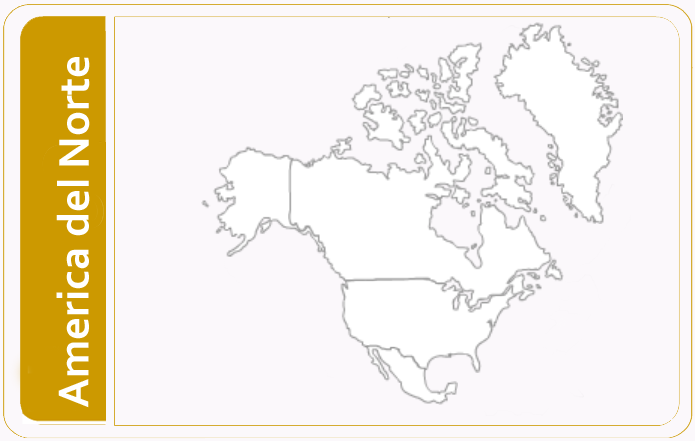
<style>
.page{position:relative;width:695px;height:441px;background:#fbf8fb}
.page>*{position:absolute;margin:0}
.t1{font:45px "Corbel-Bold";color:#ffffff}
</style>
<div class="page">
<p class="t1" style="left:56px;top:57px;width:34px;height:351px;rotate:-90deg">America del Norte</p>
</div>
